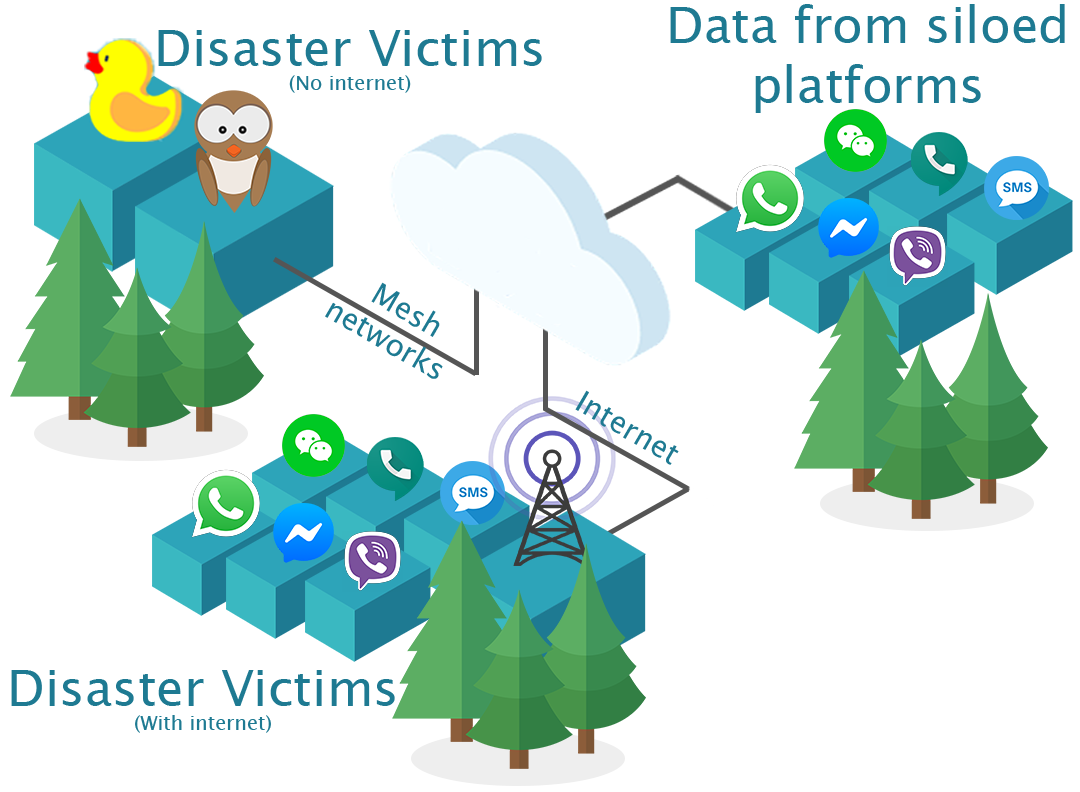
<style>
.page{position:relative;width:1080px;height:792px;background:#ffffff}
.page>*{position:absolute;margin:0}
.t1{font:50px "LucidaSansUnicode";color:#1e7a92}
.t2{font:20px "LucidaSansUnicode";color:#1e7a92}
.t3{font:30px "LucidaSansUnicode";color:#1e7a92}
</style>
<div class="page">
<p class="t1" style="left:670px;top:4px;width:395px;height:109px;text-align:center">Data from siloed<br>platforms</p>
<p class="t1" style="left:158px;top:30px;width:384px;height:63px;text-align:center">Disaster Victims<br><span class="t2">(No internet)</span></p>
<p class="t3" style="left:325px;top:282px;width:118px;height:97px;text-align:center;rotate:30deg">Mesh <br>networks</p>
<p class="t3" style="left:575px;top:390px;width:104px;height:75px;rotate:30deg">Internet</p>
<p class="t1" style="left:11px;top:670px;width:384px;height:63px;text-align:center">Disaster Victims<br><span class="t2">(With internet)</span></p>
</div>
